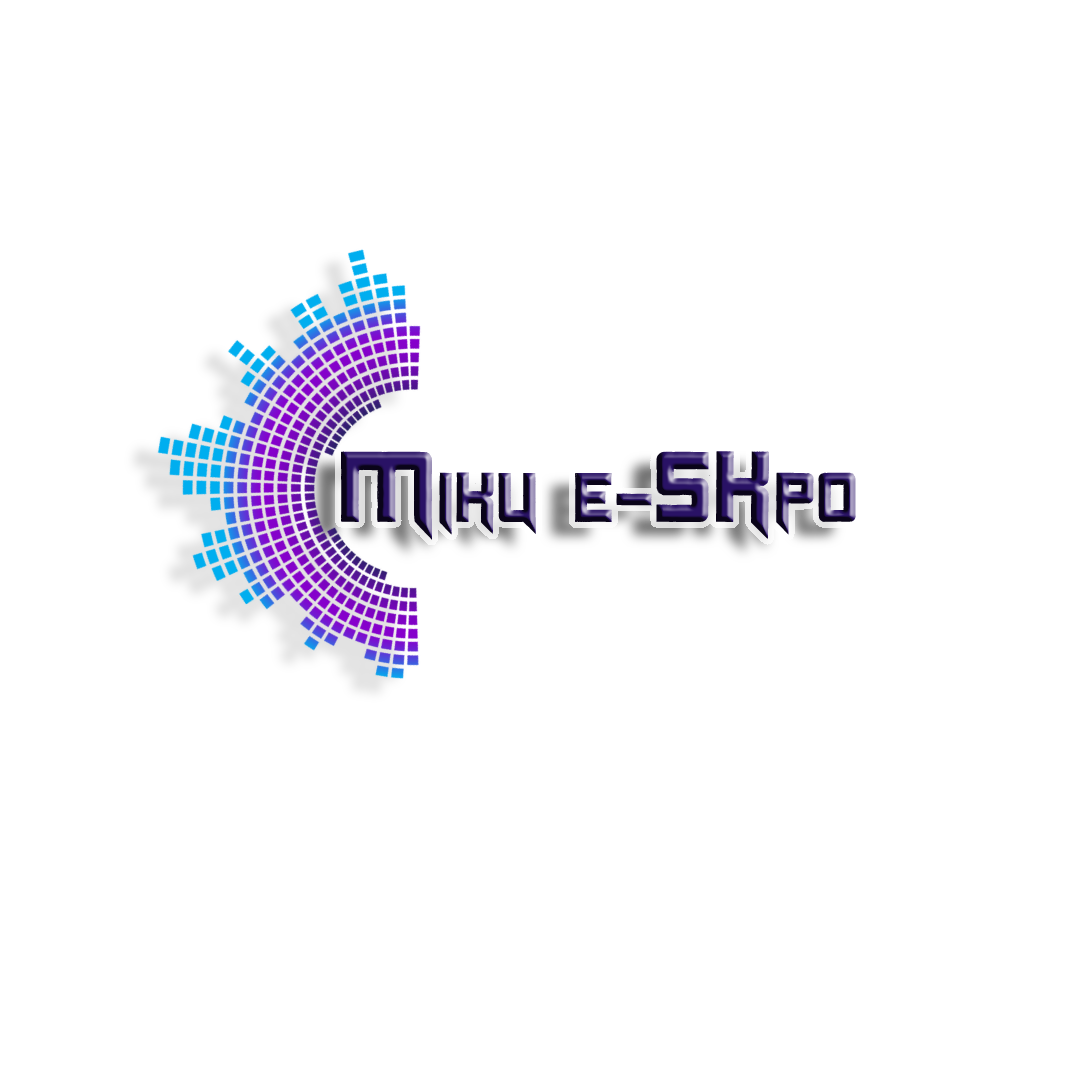
<style>
.page{position:relative;width:1080px;height:1080px;background:#ffffff}
.page>*{position:absolute;margin:0}
.t1{font:70px "Origicide"}
.t2{font:100px "Origicide"}
</style>
<div class="page">
<p class="t1" style="left:341px;top:451px;width:515px;height:89px"><span class="t2">M</span>iku e-<span class="t2">Sk</span>po</p>
</div>
